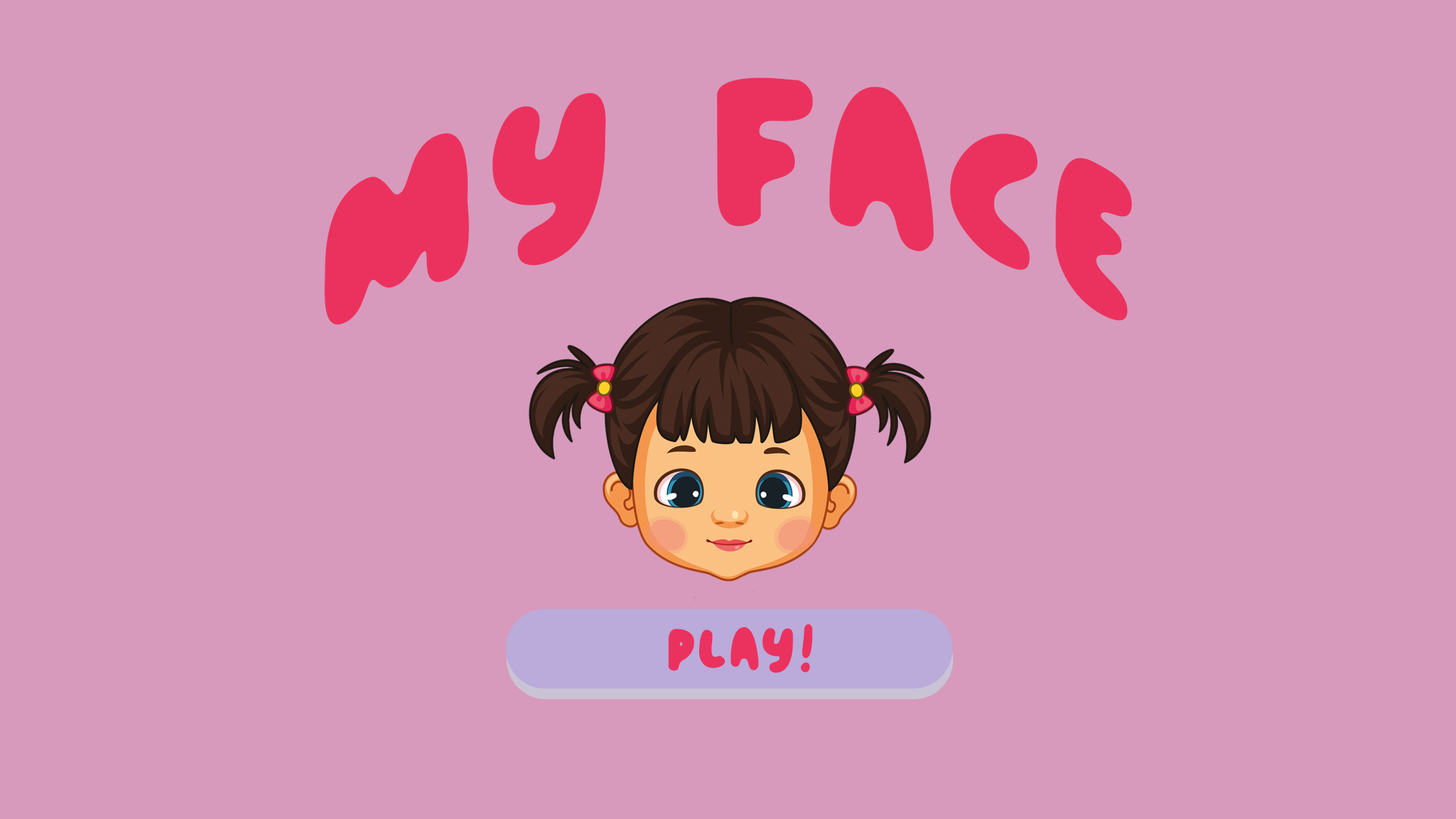
<style>
.page{position:relative;width:1456px;height:819px;background:#d79abc}
.page>*{position:absolute;margin:0}
.t1{font:234.3px "BomberBalloon";letter-spacing:0.08em;color:#eb325f}
.t2{font:64.5px "BomberBalloon";letter-spacing:0.08em;color:#eb325f}
</style>
<div class="page">
<p class="t1" style="left:325px;top:77px;width:807px;height:248px">My Face</p>
<p class="t2" style="left:668px;top:624px;width:145px;height:49px">PLAY!</p>
</div>
